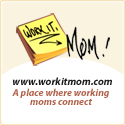
<style>
.page{position:relative;width:125px;height:125px;background:#ffffff}
.page>*{position:absolute;margin:0}
.t1{font:10.6px "MyriadPro-BoldIt";color:#1b1b1b}
.t2{font:10px/9px "MyriadPro-BoldIt";color:#b06049}
</style>
<div class="page">
<p class="t1" style="left:12px;top:77px;width:100px;height:8px">www.workitmom.com</p>
<p class="t2" style="left:12px;top:88px;width:97px;height:17px;text-align:center">A place where working moms connect</p>
</div>
